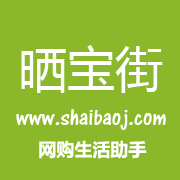
<style>
.page{position:relative;width:180px;height:180px;background:#8bb82a}
.page>*{position:absolute;margin:0}
.t1{font:48px "MicrosoftYaHei";color:#ffffff}
.t2{font:24px "ARCENA";color:#ffffff}
.t3{font:18px "MicrosoftYaHei-Bold";color:#ffffff}
</style>
<div class="page">
<p class="t1" style="left:21px;top:45px;width:142px;height:48px">晒宝街</p>
<p class="t2" style="left:16px;top:109px;width:150px;height:21px">www.shaibaoj.com</p>
<p class="t3" style="left:39px;top:140px;width:108px;height:19px">网购生活助手</p>
</div>
